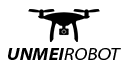
<style>
.page{position:relative;width:128px;height:64px;background:#ffffff}
.page>*{position:absolute;margin:0}
.t1{font:17.9px "MyriadPro-BoldIt";color:#000000;scale:1.09 1}
.t2{font:17.9px "MyriadPro-It";color:#000000;scale:1.09 1}
</style>
<div class="page">
<p class="t1" style="left:8px;top:48px;width:113px;height:12px">UNMEI<span class="t2">ROBOT</span></p>
</div>
